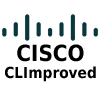
<style>
.page{position:relative;width:100px;height:100px;background:#ffffff}
.page>*{position:absolute;margin:0}
.t1{font:22.2px "DejaVuSansCondensed-Bold";color:#000000}
.t2{font:15.3px "DejaVuSansCondensed-Bold";color:#000000}
</style>
<div class="page">
<p class="t1" style="left:17px;top:44px;width:67px;height:18px">CISCO</p>
<p class="t2" style="left:5px;top:66px;width:91px;height:16px">CLImproved</p>
</div>
